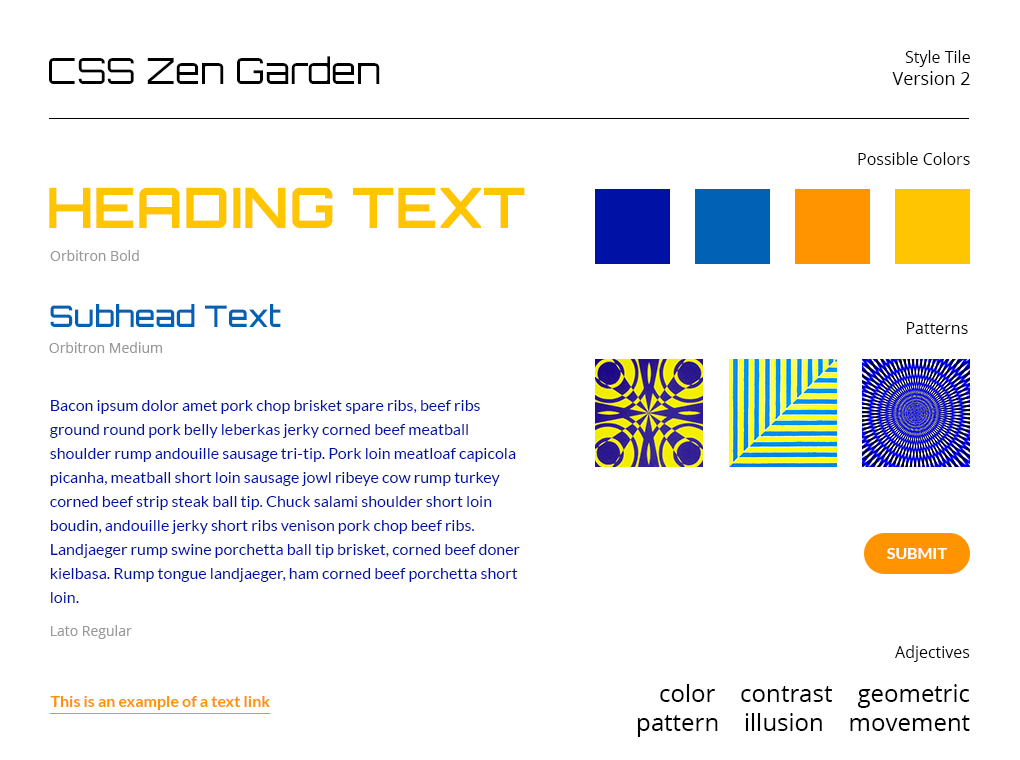
<style>
.page{position:relative;width:1020px;height:760px;background:#ffffff}
.page>*{position:absolute;margin:0}
.t1{font:16px "OpenSans";color:#000000}
.t2{font:18px "OpenSans";color:#000000}
.t3{font:36px "Orbitron-Regular";color:#000000}
.t4{font:12px "MyriadPro-Regular";color:#000000}
.t5{font:56px "Orbitron-Bold";color:#ffc600}
.t6{font:14px "OpenSans";color:#999999}
.t7{font:30px "Orbitron-Medium";color:#0061b5}
.t8{font:12px "MyriadPro-Regular";color:#999999}
.t9{font:12px/24px "Lato-Regular";color:#0012a5}
.t10{font:16px "Lato-Bold";color:#ffffff}
.t11{font:24px "MyriadPro-Regular";color:#000000}
.t12{font:16px "Lato-Bold";color:#ff9400}
</style>
<div class="page">
<p class="t1" style="left:892px;top:50px;width:78px;height:35px;text-align:right">Style Tile<br><span class="t2">Version 2</span></p>
<p class="t3" style="left:49px;top:56px;width:331px;height:28px">CSS Zen Garden</p>
<p class="t4" style="left:858px;top:152px;width:112px;height:13px">Possible Colors</p>
<p class="t5" style="left:49px;top:187px;width:476px;height:41px">HEADING TEXT</p>
<p class="t6" style="left:50px;top:250px;width:89px;height:11px">Orbitron Bold</p>
<p class="t7" style="left:50px;top:304px;width:231px;height:23px">Subhead Text</p>
<p class="t4" style="left:907px;top:322px;width:61px;height:12px">Patterns</p>
<p class="t8" style="left:49px;top:342px;width:113px;height:11px">Orbitron Medium</p>
<p class="t9" style="left:50px;top:400px;width:470px;height:203px">Bacon ipsum dolor amet pork chop brisket spare ribs, beef ribs ground round pork belly leberkas jerky corned beef meatball shoulder rump andouille sausage tri-tip. Pork loin meatloaf capicola picanha, meatball short loin sausage jowl ribeye cow rump turkey corned beef strip steak ball tip. Chuck salami shoulder short loin boudin, andouille jerky short ribs venison pork chop beef ribs. Landjaeger rump swine porchetta ball tip brisket, corned beef doner kielbasa. Rump tongue landjaeger, ham corned beef porchetta short loin.</p>
<p class="t10" style="left:887px;top:548px;width:60px;height:11px">SUBMIT</p>
<p class="t8" style="left:51px;top:625px;width:81px;height:14px">Lato Regular</p>
<p class="t1" style="left:895px;top:645px;width:75px;height:17px">Adjectives</p>
<p class="t11" style="left:637px;top:684px;width:333px;height:53px;text-align:right">color    contrast    geometric<br>pattern    illusion    movement</p>
<p class="t12" style="left:50px;top:696px;width:220px;height:14px">This is an example of a text link</p>
</div>
